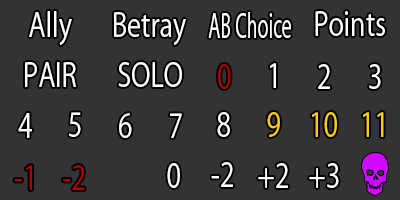
<style>
.page{position:relative;width:400px;height:200px;background:#333333}
.page>*{position:absolute;margin:0}
.t1{font:32.8px "KozGoPr6N-Regular";color:#ffffff;scale:0.8 1}
.t2{font:32.8px "KozGoPr6N-Regular";color:#ffffff;scale:0.56 1}
.t3{font:32.8px "KozGoPr6N-Regular";color:#aa0000;scale:0.8 1}
.t4{font:32.8px "KozGoPr6N-Regular";color:#ffcc11;scale:0.8 1}
.t5{font:32.8px "KozGoPr6N-Regular";color:#fcfcfc;scale:0.8 1}
</style>
<div class="page">
<p class="t1" style="left:29px;top:11px;width:43px;height:35px">Ally</p>
<p class="t1" style="left:114px;top:12px;width:72px;height:34px">Betray</p>
<p class="t2" style="left:208px;top:12px;width:83px;height:26px">AB Choice</p>
<p class="t1" style="left:315px;top:11px;width:70px;height:25px">Points</p>
<p class="t1" style="left:25px;top:62px;width:51px;height:25px">PAIR</p>
<p class="t1" style="left:118px;top:62px;width:64px;height:25px">SOLO</p>
<p class="t3" style="left:218px;top:64px;width:13px;height:25px">0</p>
<p class="t1" style="left:270px;top:63px;width:6px;height:25px">1</p>
<p class="t1" style="left:318px;top:64px;width:12px;height:25px">2</p>
<p class="t1" style="left:369px;top:64px;width:12px;height:25px">3</p>
<p class="t1" style="left:18px;top:113px;width:14px;height:25px">4</p>
<p class="t1" style="left:69px;top:112px;width:12px;height:25px">5</p>
<p class="t1" style="left:119px;top:113px;width:13px;height:25px">6</p>
<p class="t1" style="left:170px;top:113px;width:12px;height:25px">7</p>
<p class="t1" style="left:217px;top:112px;width:13px;height:25px">8</p>
<p class="t4" style="left:267px;top:112px;width:13px;height:25px">9</p>
<p class="t4" style="left:312px;top:112px;width:25px;height:25px">10</p>
<p class="t4" style="left:363px;top:112px;width:21px;height:25px">11</p>
<p class="t3" style="left:14px;top:165px;width:18px;height:25px">-1</p>
<p class="t3" style="left:63px;top:165px;width:22px;height:25px">-2</p>
<p class="t5" style="left:167px;top:163px;width:13px;height:25px">0</p>
<p class="t1" style="left:211px;top:162px;width:22px;height:25px">-2</p>
<p class="t1" style="left:258px;top:163px;width:30px;height:25px">+2</p>
<p class="t1" style="left:309px;top:163px;width:30px;height:25px">+3</p>
</div>
